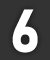
<style>
.page{position:relative;width:50px;height:60px;background:#333333}
.page>*{position:absolute;margin:0}
.t1{font:60px "Bahnschrift-Bold";color:#ffffff}
</style>
<div class="page">
<p class="t1" style="left:12px;top:9px;width:26px;height:44px">6</p>
</div>
